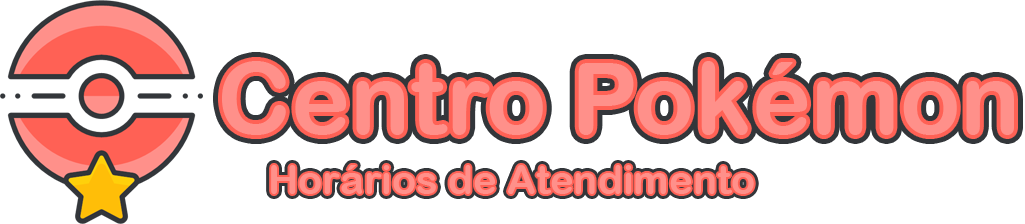
<style>
.page{position:relative;width:1025px;height:224px;background:#ffffff}
.page>*{position:absolute;margin:0}
.t1{font:100px "ArialRoundedMTBold";color:#ff908a}
.t2{font:40px "ArialRoundedMTBold";color:#ff908a}
</style>
<div class="page">
<p class="t1" style="left:222px;top:61px;width:792px;height:74px">Centro Pokémon</p>
<p class="t2" style="left:271px;top:165px;width:483px;height:29px">Horários de Atendimento</p>
</div>
